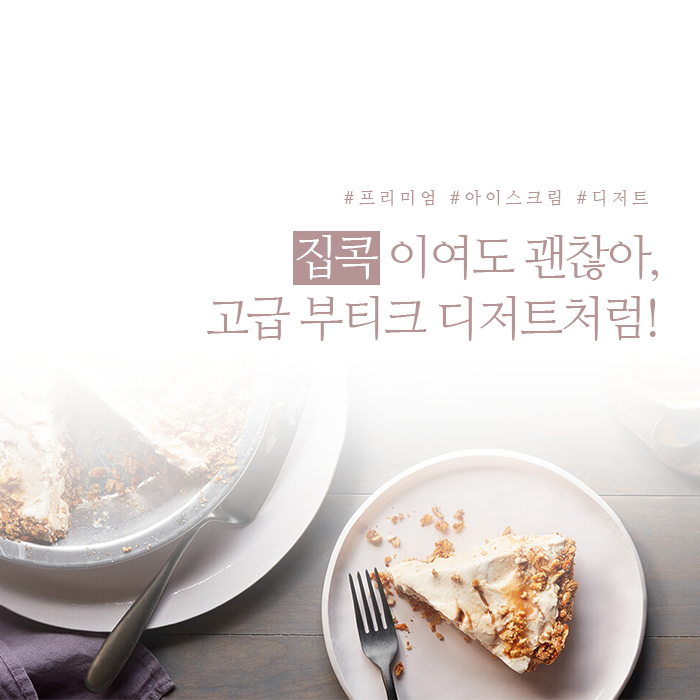
<style>
.page{position:relative;width:700px;height:700px;background:#ffffff}
.page>*{position:absolute;margin:0}
.t1{font:17.1px "NanumMyeongjo";letter-spacing:0.27em;color:#b49494}
.t2{font:48.4px "NanumMyeongjo";letter-spacing:-0.07em;color:#b49494}
.t3{font:48.4px "NanumMyeongjo";letter-spacing:-0.07em;color:#ffffff}
</style>
<div class="page">
<p class="t1" style="left:344px;top:190px;width:304px;height:17px">#프리미엄 #아이스크림 #디저트</p>
<p class="t2" style="left:206px;top:234px;width:452px;height:107px;text-align:right"><span class="t3">집콕 </span>이여도 괜찮아,<br>고급 부티크 디저트처럼!</p>
</div>
